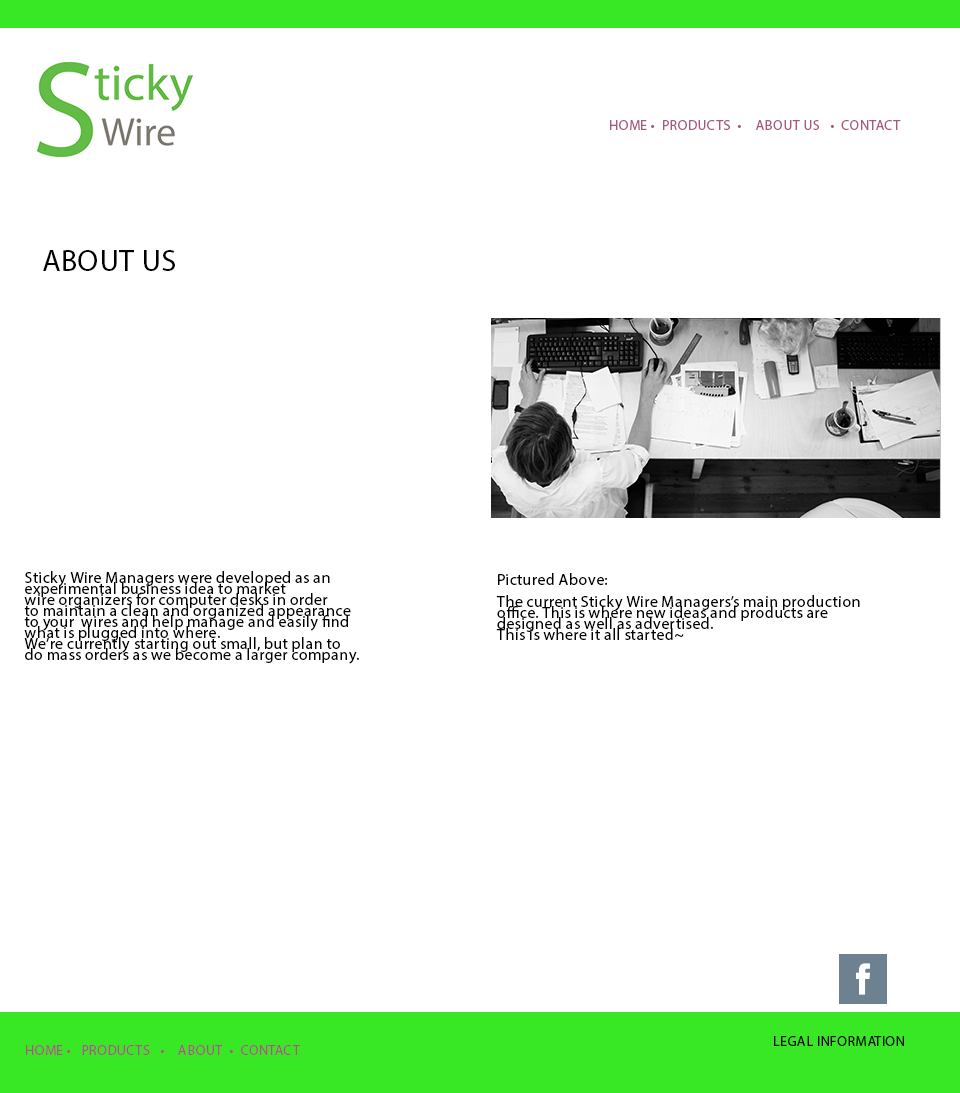
<style>
.page{position:relative;width:960px;height:1093px;background:#ffffff}
.page>*{position:absolute;margin:0}
.t1{font:14px "MyriadPro-Regular";letter-spacing:0.025em;color:#a65980;text-transform:uppercase}
.t2{font:30px "MyriadPro-Regular";letter-spacing:0.025em;color:#000000;text-transform:uppercase}
.t3{font:16px/11px "MyriadPro-Regular";letter-spacing:0.025em;color:#000000}
.t4{font:14px "MyriadPro-Regular";letter-spacing:0.025em;color:#010101;text-transform:uppercase}
</style>
<div class="page">
<p class="t1" style="left:610px;top:120px;width:291px;height:10px">home •  Products  •    ABOUT US   •  contact</p>
<p class="t2" style="left:43px;top:250px;width:132px;height:21px">About us</p>
<p class="t3" style="left:24px;top:571px;width:335px;height:93px">Sticky Wire Managers were developed as an<br>experimental business idea to market<br>wire organizers for computer desks in order<br>to maintain a clean and organized appearance<br>to your  wires and help manage and easily find <br>what is plugged into where.<br>We’re currently starting out small, but plan to <br>do mass orders as we become a larger company.</p>
<p class="t3" style="left:496px;top:573px;width:364px;height:67px">Pictured Above:<br><br>The current Sticky Wire Managers’s main production<br>office. This is where new ideas and products are <br>designed as well as advertised.<br>This is where it all started~</p>
<p class="t4" style="left:774px;top:1036px;width:130px;height:10px">Legal Information</p>
<p class="t1" style="left:26px;top:1045px;width:274px;height:10px">home •   Products   •    ABOUT  •  contact</p>
</div>
